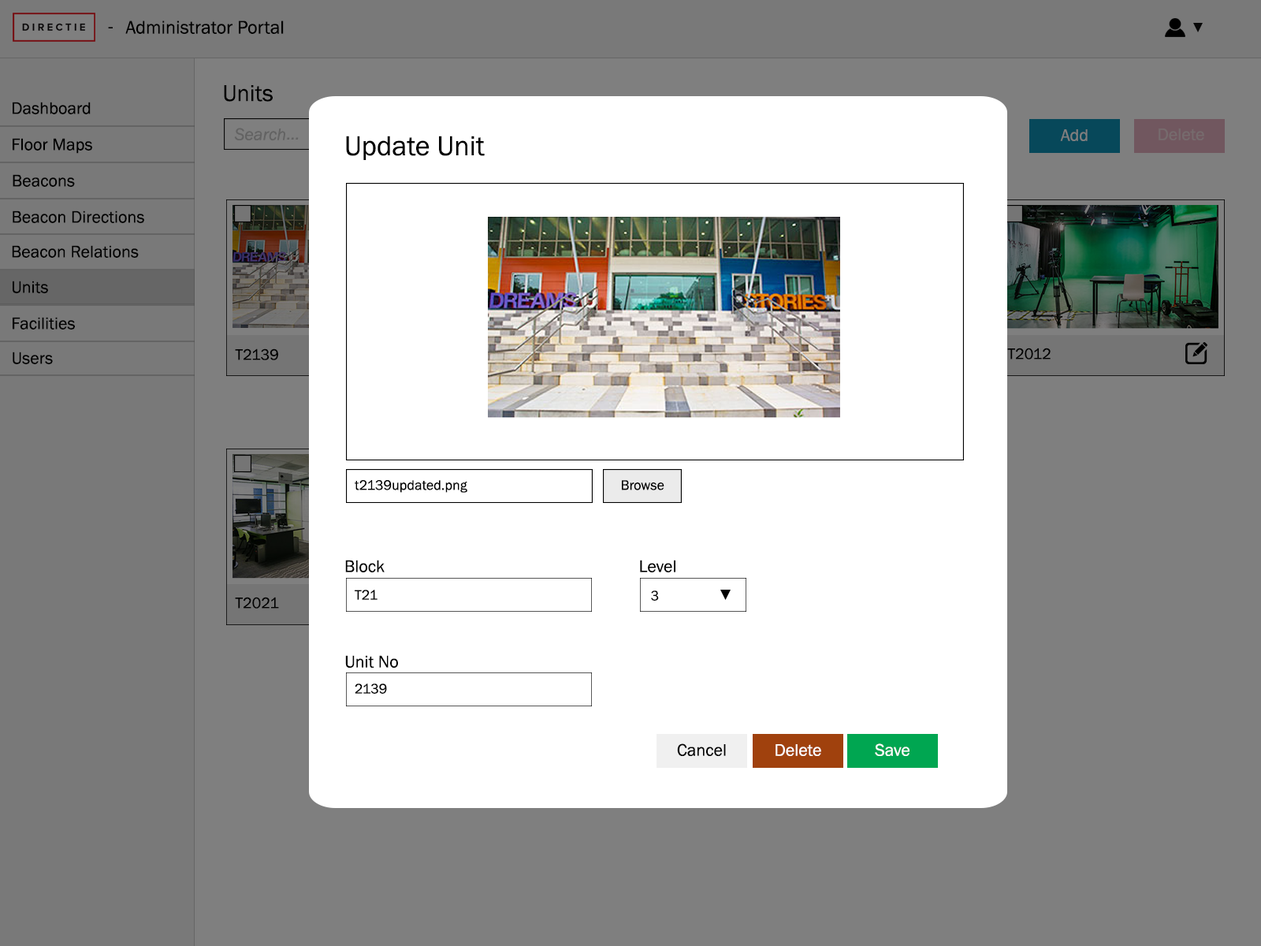
<style>
.page{position:relative;width:1261px;height:946px;background:#ffffff}
.page>*{position:absolute;margin:0}
.t1{font:18.9px "FranklinGothic-Book";color:#000000}
.t2{font:23.6px "FranklinGothic-Book";color:#000000}
.t3{font:17.3px "FranklinGothic-Book";color:#000000}
.t4{font:28.4px "FranklinGothic-Book";color:#000000}
.t5{font:17.3px "FranklinGothic-Book";color:#7f7f7f}
.t6{font:17.3px "FranklinGothic-Book";color:#766b6d}
.t7{font:15.7px "FranklinGothic-Book";color:#000000}
.t8{font:14.2px "FranklinGothic-Book";color:#000000}
.t9{font:17.3px "FranklinGothic-Book";color:#010101}
.t10{font:17.3px "FranklinGothic-Book";color:#fefefe}
</style>
<div class="page">
<p class="t1" style="left:108px;top:27px;width:5px;height:1px">-</p>
<p class="t1" style="left:125px;top:20px;width:159px;height:14px">Administrator Portal</p>
<p class="t2" style="left:224px;top:85px;width:49px;height:17px">Units</p>
<p class="t3" style="left:13px;top:102px;width:78px;height:12px">Dashboard</p>
<p class="t3" style="left:13px;top:138px;width:79px;height:16px">Floor Maps</p>
<p class="t4" style="left:346px;top:136px;width:139px;height:24px">Update Unit</p>
<p class="t5" style="left:1060px;top:129px;width:28px;height:12px">Add</p>
<p class="t6" style="left:1158px;top:128px;width:46px;height:12px">Delete</p>
<p class="t3" style="left:13px;top:174px;width:62px;height:13px">Beacons</p>
<p class="t3" style="left:13px;top:210px;width:131px;height:13px">Beacon Directions</p>
<p class="t3" style="left:12px;top:245px;width:127px;height:13px">Beacon Relations</p>
<p class="t3" style="left:13px;top:281px;width:35px;height:12px">Units</p>
<p class="t3" style="left:13px;top:317px;width:62px;height:12px">Facilities</p>
<p class="t3" style="left:13px;top:351px;width:40px;height:13px">Users</p>
<p class="t7" style="left:235px;top:348px;width:43px;height:12px">T2139</p>
<p class="t7" style="left:1007px;top:348px;width:44px;height:11px">T2012</p>
<p class="t8" style="left:355px;top:480px;width:112px;height:13px">t2139updated.png</p>
<p class="t8" style="left:622px;top:480px;width:42px;height:10px">Browse</p>
<p class="t3" style="left:345px;top:560px;width:40px;height:12px">Block</p>
<p class="t3" style="left:640px;top:560px;width:35px;height:12px">Level</p>
<p class="t8" style="left:355px;top:589px;width:22px;height:11px">T21</p>
<p class="t8" style="left:651px;top:590px;width:8px;height:11px">3</p>
<p class="t7" style="left:235px;top:597px;width:44px;height:11px">T2021</p>
<p class="t3" style="left:345px;top:655px;width:53px;height:12px">Unit No</p>
<p class="t8" style="left:355px;top:683px;width:32px;height:11px">2139</p>
<p class="t9" style="left:677px;top:743px;width:49px;height:13px">Cancel</p>
<p class="t10" style="left:775px;top:744px;width:46px;height:12px">Delete</p>
<p class="t10" style="left:875px;top:743px;width:34px;height:13px">Save</p>
</div>
